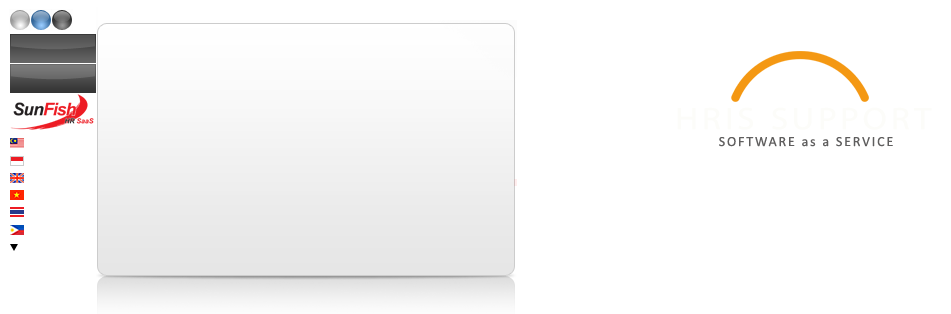
<style>
.page{position:relative;width:951px;height:314px;background:#ffffff}
.page>*{position:absolute;margin:0}
.t1{font:31.3px "MyriadPro-Regular";letter-spacing:0.13em;color:#fcfcf9;scale:1.12 1}
.t2{font:14px "Calibri";letter-spacing:0.13em;color:#5f5e5e}
</style>
<div class="page">
<p class="t1" style="left:677px;top:107px;width:255px;height:23px">HRIS SUPPORT</p>
<p class="t2" style="left:719px;top:137px;width:174px;height:10px">SOFTWARE as a SERVICE</p>
</div>
